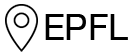
<style>
.page{position:relative;width:134px;height:56px;background:#ffffff}
.page>*{position:absolute;margin:0}
.t1{font:36px "HelveticaNeue";color:#000000}
</style>
<div class="page">
<p class="t1" style="left:45px;top:14px;width:83px;height:26px">EPFL</p>
</div>
